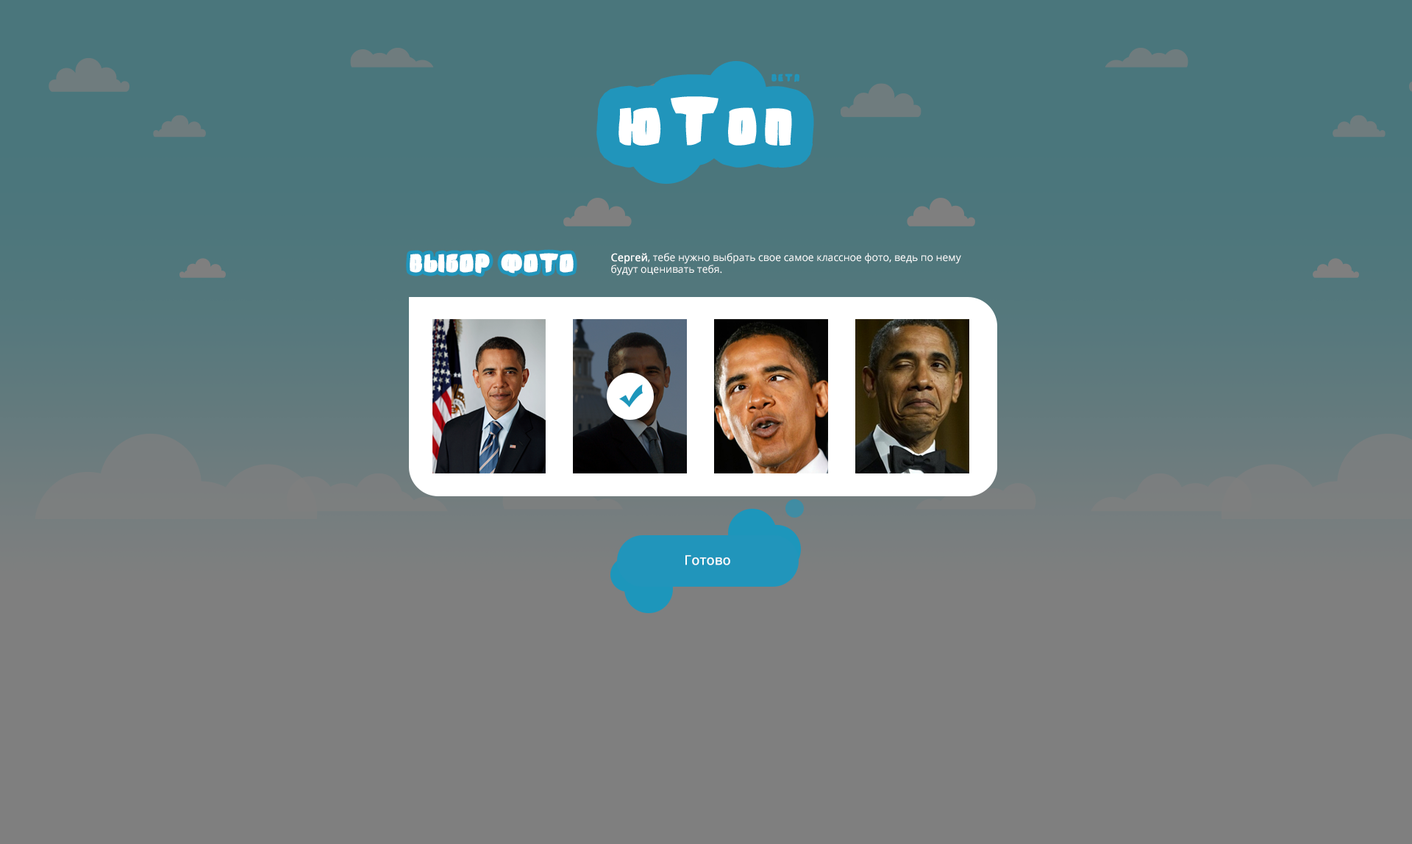
<style>
.page{position:relative;width:1412px;height:844px;background:#7f7f7f}
.page>*{position:absolute;margin:0}
.t1{font:10.3px "SumkinfreetypeMRfrukta2010";letter-spacing:0.1em;color:#2195bb}
.t2{font:53px "SumkinfreetypeMRfrukta2010";letter-spacing:0.1em;color:#ffffff}
.t3{font:20.6px "SumkinfreetypeMRfrukta2010";color:#ffffff}
.t4{font:10.3px "OpenSans";color:#ffffff}
.t5{font:10.3px "OpenSans";color:#ffffff;font-weight:bold}
.t6{font:13.2px "OpenSans";color:#ffffff;font-weight:bold}
</style>
<div class="page">
<p class="t1" style="left:772px;top:74px;width:28px;height:8px">beta</p>
<p class="t2" style="left:619px;top:96px;width:173px;height:50px">юТоп</p>
<p class="t3" style="left:410px;top:253px;width:164px;height:21px">ВЫБОР ФОТО</p>
<p class="t4" style="left:611px;top:253px;width:350px;height:23px"><span class="t5">Сергей</span>, тебе нужно выбрать свое самое классное фото, ведь по нему <br>будут оценивать тебя.</p>
<p class="t6" style="left:686px;top:555px;width:44px;height:11px">Готово</p>
</div>
